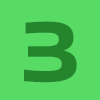
<style>
.page{position:relative;width:100px;height:100px;background:#58db64}
.page>*{position:absolute;margin:0}
.t1{font:85px "AllumiStdExtended-ExtraBold";color:#24852d}
</style>
<div class="page">
<p class="t1" style="left:24px;top:21px;width:53px;height:62px">3</p>
</div>
